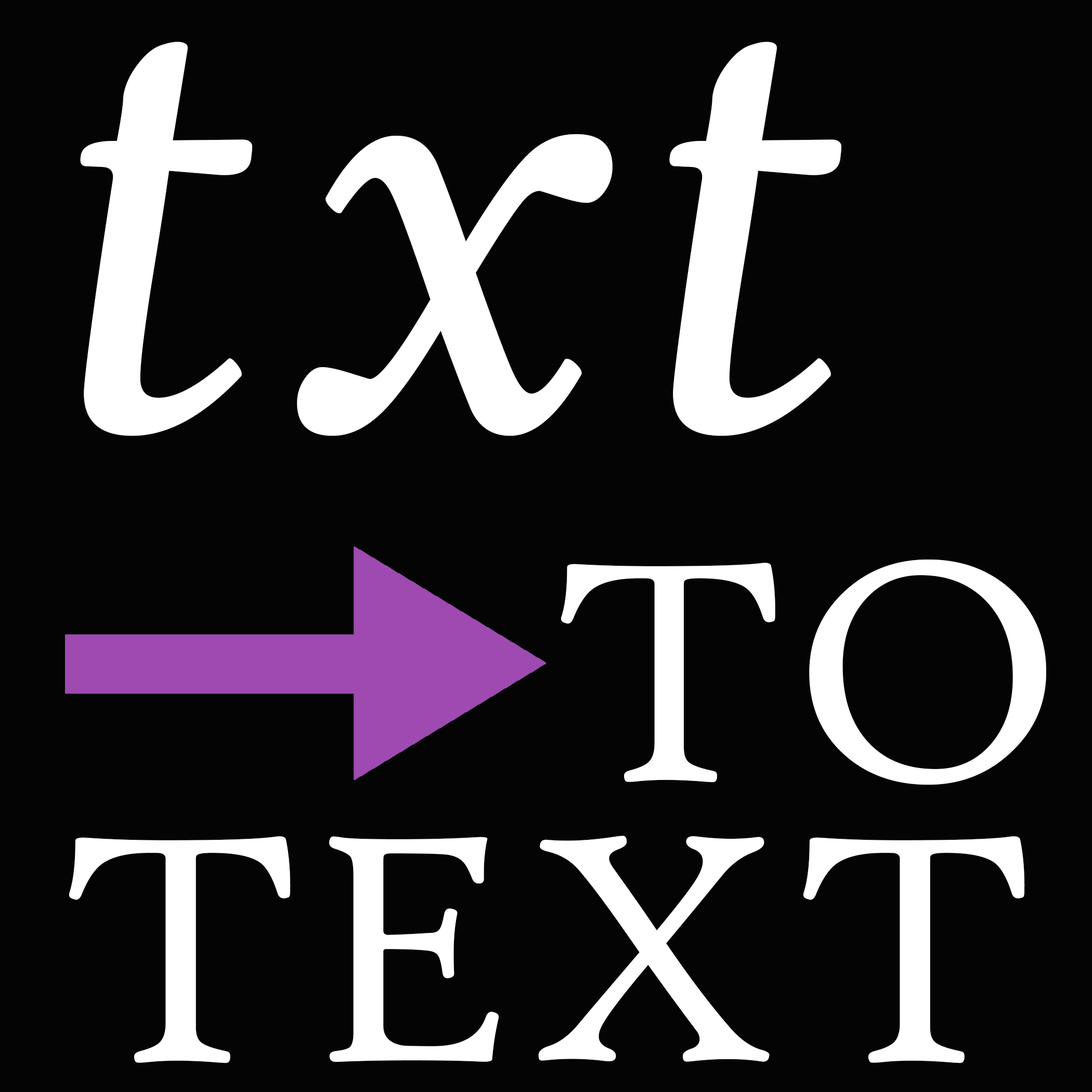
<style>
.page{position:relative;width:1092px;height:1092px;background:#040404}
.page>*{position:absolute;margin:0}
.t1{font:780px "HighTowerText-Italic";color:#ffffff}
.t2{font:335.8px "HighTowerText-Reg";color:#ffffff}
.t3{font:346.7px "HighTowerText-Reg";color:#ffffff}
</style>
<div class="page">
<p class="t1" style="left:80px;top:42px;width:761px;height:394px">txt</p>
<p class="t2" style="left:561px;top:560px;width:485px;height:225px">TO</p>
<p class="t3" style="left:69px;top:836px;width:956px;height:227px">TEXT</p>
</div>
